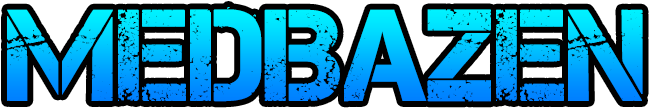
<style>
.page{position:relative;width:649px;height:108px;background:#000000}
.page>*{position:absolute;margin:0}
.t1{font:130px "Captureit"}
</style>
<div class="page">
<p class="t1" style="left:7px;top:7px;width:636px;height:95px">MEDBAZEN</p>
</div>
